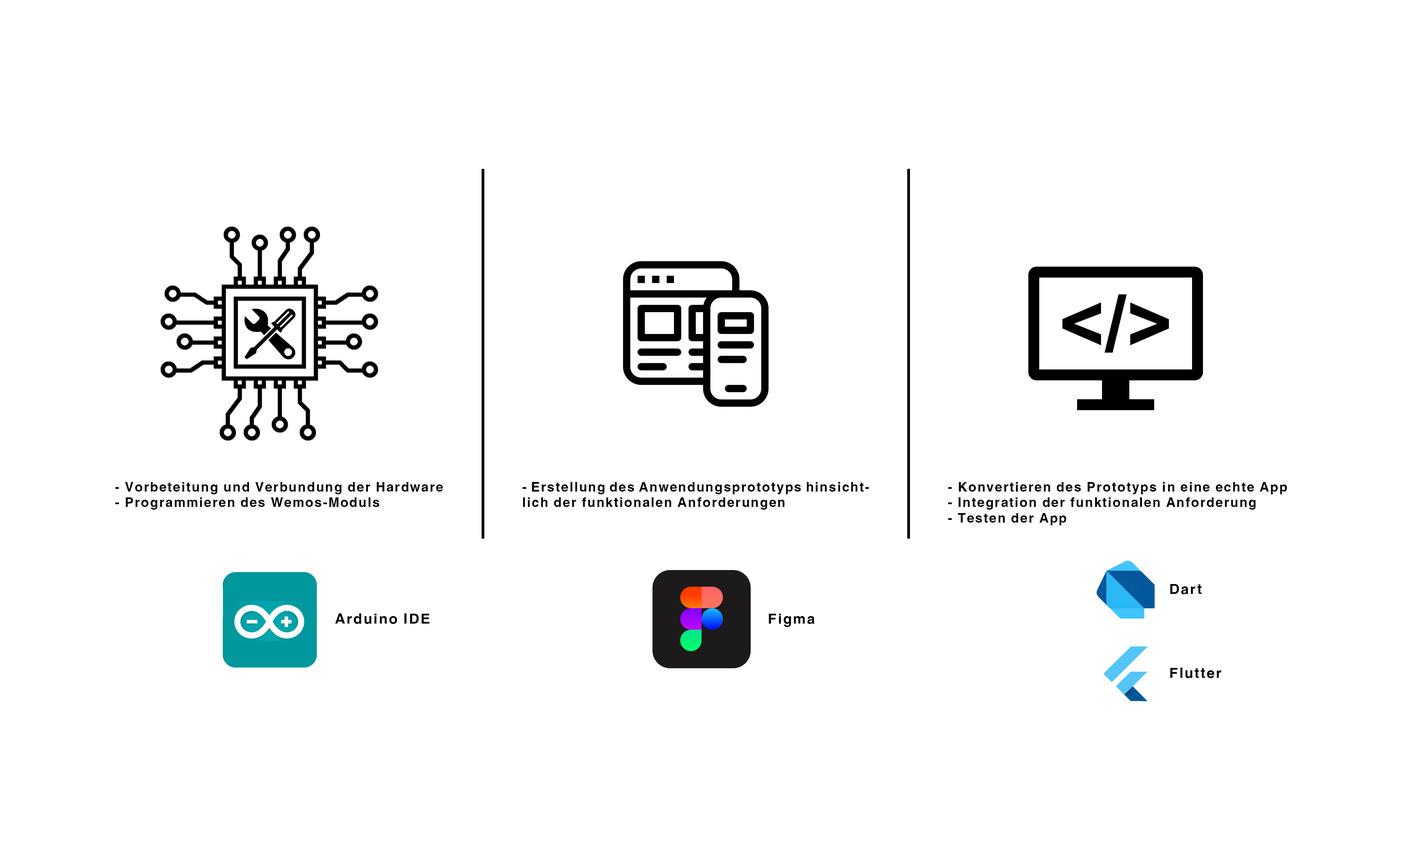
<style>
.page{position:relative;width:1410px;height:846px;background:#ffffff}
.page>*{position:absolute;margin:0}
.t1{font:14.9px/15.5px "-Abdoullah-AshgarEL-kharef";letter-spacing:0.08em;color:#000000}
.t2{font:16.4px "-Abdoullah-AshgarEL-kharef";letter-spacing:0.08em;color:#000000}
</style>
<div class="page">
<p class="t1" style="left:115px;top:482px;width:328px;height:28px">- Vorbeteitung und Verbundung der Hardware<br>- Programmieren des Wemos-Moduls</p>
<p class="t1" style="left:522px;top:482px;width:347px;height:28px">- Erstellung des Anwendungsprototyps hinsichtlich der funktionalen Anforderungen</p>
<p class="t1" style="left:948px;top:482px;width:339px;height:43px">- Konvertieren des Prototyps in eine echte App<br>- Integration der funktionalen Anforderung<br>- Testen der App</p>
<p class="t2" style="left:1170px;top:584px;width:31px;height:10px">Dart</p>
<p class="t2" style="left:335px;top:613px;width:94px;height:11px">Arduino IDE</p>
<p class="t2" style="left:769px;top:614px;width:45px;height:13px">Figma</p>
<p class="t2" style="left:1170px;top:667px;width:51px;height:11px">Flutter</p>
</div>
